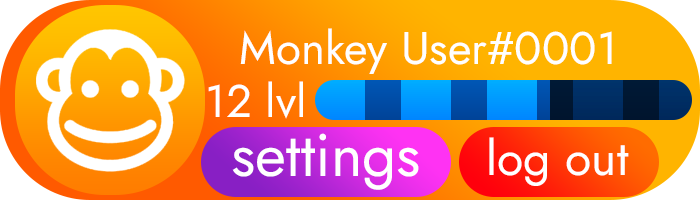
<style>
.page{position:relative;width:700px;height:200px}
.page>*{position:absolute;margin:0}
.t1{font:45.6px "Jost-Regular";color:#ffffff}
.t2{font:60px "Jost-Regular";color:#ffffff}
.t3{font:48px "Jost-Regular";color:#ffffff}
</style>
<div class="page">
<p class="t1" style="left:240px;top:28px;width:372px;height:46px">Monkey User#0001</p>
<p class="t1" style="left:208px;top:81px;width:95px;height:38px">12 lvl</p>
<p class="t2" style="left:232px;top:133px;width:187px;height:57px">settings</p>
<p class="t3" style="left:489px;top:137px;width:140px;height:49px">log out</p>
</div>
